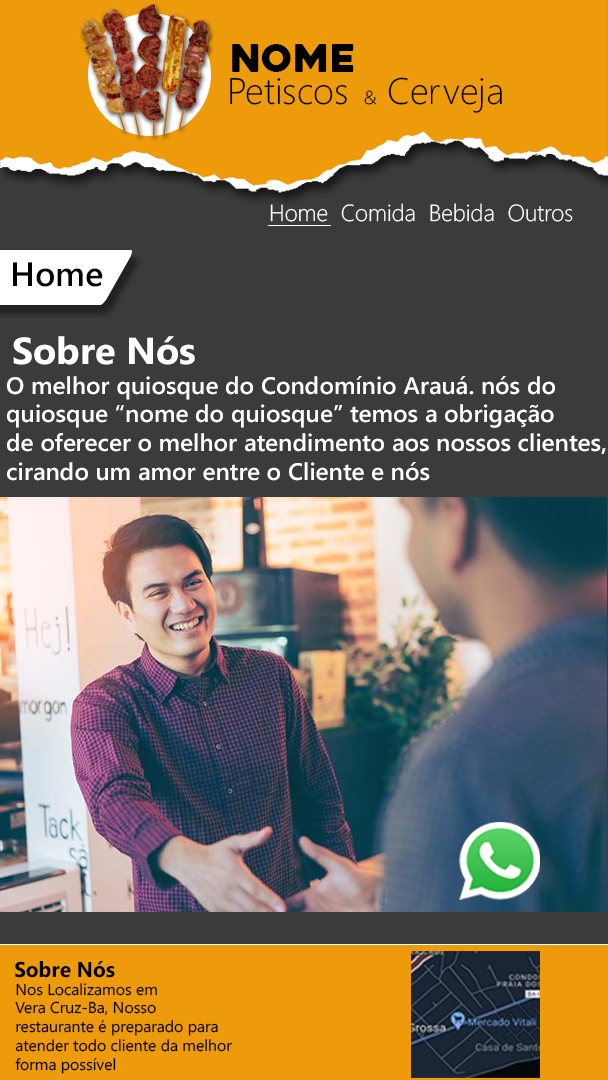
<style>
.page{position:relative;width:608px;height:1080px;background:#3c3b3b}
.page>*{position:absolute;margin:0}
.t1{font:38.2px "Heavitas";color:#000000}
.t2{font:37px "SegoeUI-Light";color:#000000}
.t3{font:18.7px "SegoeUI-Light";color:#000000}
.t4{font:23.3px "SegoeUI-Light";color:#ffffff}
.t5{font:33.7px "SegoeUI-Semibold";color:#000000}
.t6{font:37.6px "SegoeUI-Bold";color:#ffffff}
.t7{font:24px "SegoeUI-Semibold";color:#ffffff}
.t8{font:21.4px "SegoeUI-Bold";color:#000000}
.t9{font:15.7px "SegoeUI";color:#000000}
</style>
<div class="page">
<p class="t1" style="left:232px;top:44px;width:122px;height:28px">Nome</p>
<p class="t2" style="left:230px;top:77px;width:272px;height:36px">Petiscos <span class="t3"> &amp;</span> Cerveja</p>
<p class="t4" style="left:270px;top:203px;width:303px;height:19px">Home  Comida  Bebida  Outros</p>
<p class="t5" style="left:13px;top:262px;width:90px;height:25px">Home</p>
<p class="t6" style="left:13px;top:336px;width:182px;height:29px">Sobre Nós</p>
<p class="t7" style="left:7px;top:376px;width:599px;height:105px">O melhor quiosque do Condomínio Arauá. nós do <br>quiosque “nome do quiosque” temos a obrigação<br>de oferecer o melhor atendimento aos nossos clientes,<br>cirando um amor entre o Cliente e nós</p>
<p class="t8" style="left:15px;top:961px;width:100px;height:17px">Sobre Nós</p>
<p class="t9" style="left:15px;top:983px;width:217px;height:91px">Nos Localizamos em<br>Vera Cruz-Ba, Nosso <br>restaurante é preparado para<br>atender todo cliente da melhor <br>forma possível</p>
</div>
